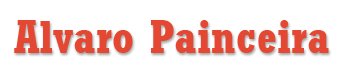
<style>
.page{position:relative;width:341px;height:79px;background:#ffffff}
.page>*{position:absolute;margin:0}
.t1{font:45.9px "Rockwell-CondensedBold";letter-spacing:0.01em;color:#e44832}
</style>
<div class="page">
<p class="t1" style="left:14px;top:20px;width:315px;height:33px">Alvaro Painceira</p>
</div>
